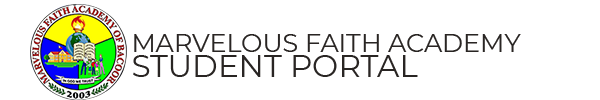
<style>
.page{position:relative;width:600px;height:100px;background:#ffffff}
.page>*{position:absolute;margin:0}
.t1{font:25.5px "Montserrat-Regular";color:#292523}
.t2{font:31.2px "Montserrat-Regular";color:#292523}
</style>
<div class="page">
<p class="t1" style="left:134px;top:34px;width:387px;height:18px">MARVELOUS FAITH ACADEMY</p>
<p class="t2" style="left:133px;top:55px;width:285px;height:22px">STUDENT PORTAL</p>
</div>
